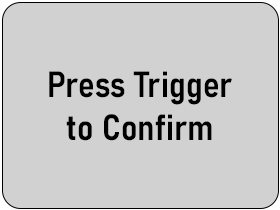
<style>
.page{position:relative;width:280px;height:210px;background:#d1d1d1}
.page>*{position:absolute;margin:0}
.t1{font:36px "Bahnschrift-SemiBoldSemiCondensed";color:#000000}
</style>
<div class="page">
<p class="t1" style="left:49px;top:71px;width:183px;height:70px;text-align:center">Press Trigger<br>to Confirm</p>
</div>
